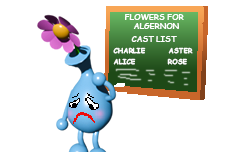
<style>
.page{position:relative;width:240px;height:152px;background:#ffffff}
.page>*{position:absolute;margin:0}
.t1{font:7.8px "ComicSansMS";color:#ffffff;font-weight:bold}
.t2{font:6.8px "ComicSansMS";color:#ffffff;font-weight:bold}
</style>
<div class="page">
<p class="t1" style="left:125px;top:14px;width:59px;height:6px">FLOWERS FOR</p>
<p class="t1" style="left:133px;top:23px;width:46px;height:6px">ALGERNON</p>
<p class="t1" style="left:131px;top:36px;width:46px;height:6px">CAST LIST</p>
<p class="t2" style="left:113px;top:47px;width:33px;height:7px">CHARLIE</p>
<p class="t2" style="left:168px;top:47px;width:25px;height:7px">ASTER</p>
<p class="t2" style="left:113px;top:58px;width:23px;height:7px">ALICE</p>
<p class="t2" style="left:167px;top:58px;width:20px;height:7px">ROSE</p>
</div>
